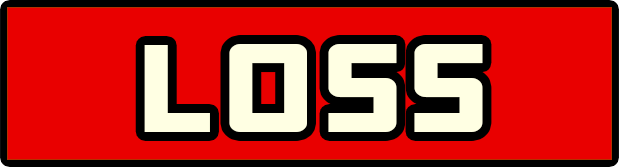
<style>
.page{position:relative;width:619px;height:167px;background:#e90000}
.page>*{position:absolute;margin:0}
.t1{font:200px "ONRAMP";color:#ffffe3;scale:1.1 1}
</style>
<div class="page">
<p class="t1" style="left:144px;top:44px;width:339px;height:88px">Loss</p>
</div>
